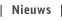
<style>
.page{position:relative;width:62px;height:21px;background:#ffffff}
.page>*{position:absolute;margin:0}
.t1{font:12px "BellGothicBT-Black";letter-spacing:0.02em;color:#4c4c4c}
</style>
<div class="page">
<p class="t1" style="left:0px;top:4px;width:62px;height:13px">|  Nieuws  |</p>
</div>
